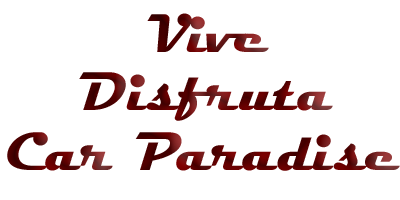
<style>
.page{position:relative;width:400px;height:200px;background:#ffffff}
.page>*{position:absolute;margin:0}
.t1{font:54.9px "Magneto-Bold"}
</style>
<div class="page">
<p class="t1" style="left:147px;top:13px;width:122px;height:39px">Vive</p>
<p class="t1" style="left:79px;top:72px;width:254px;height:49px">Disfruta</p>
<p class="t1" style="left:7px;top:132px;width:393px;height:39px">Car Paradise</p>
</div>
